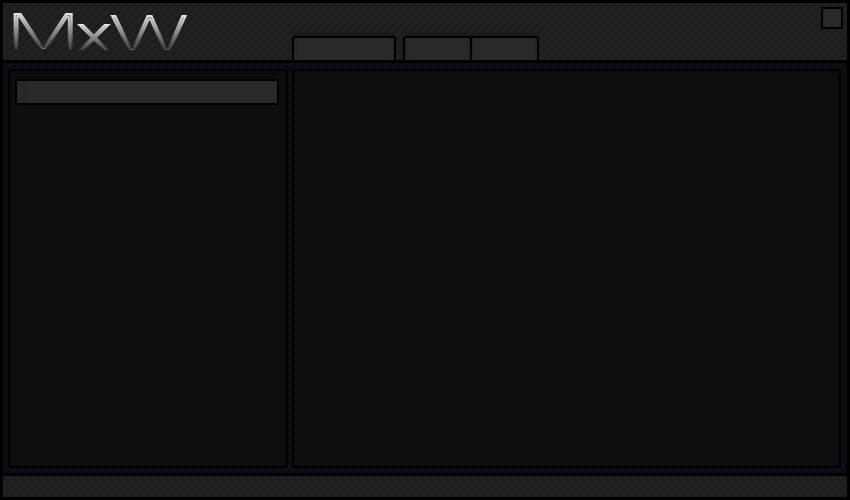
<style>
.page{position:relative;width:850px;height:500px;background:#0f0f0f}
.page>*{position:absolute;margin:0}
.t1{font:49.7px "Michroma"}
.t2{font:48.7px "Michroma"}
</style>
<div class="page">
<p class="t1" style="left:13px;top:13px;width:60px;height:38px">M</p>
<p class="t2" style="left:110px;top:15px;width:77px;height:37px">W</p>
<p class="t1" style="left:76px;top:24px;width:36px;height:28px">x</p>
</div>
